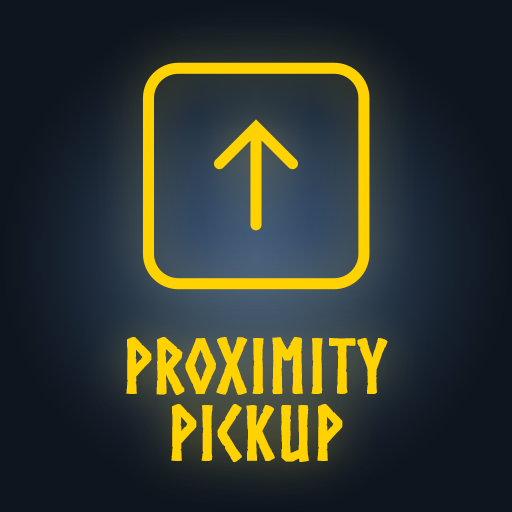
<style>
.page{position:relative;width:512px;height:512px;background:#0e151e}
.page>*{position:absolute;margin:0}
.t1{font:75px/66.7px "Norse-Bold";color:#ffd200;font-weight:bold}
</style>
<div class="page">
<p class="t1" style="left:126px;top:337px;width:262px;height:125px;text-align:center">Proximity<br>Pickup</p>
</div>
